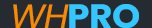
<style>
.page{position:relative;width:152px;height:28px;background:#262a31}
.page>*{position:absolute;margin:0}
.t1{font:33.8px "Poppins-Bold";letter-spacing:-0.01em;color:#33c6ff;text-transform:uppercase;scale:1.06 1}
.t2{font:33.8px "Poppins-Regular";letter-spacing:-0.01em;color:#f78b00;text-transform:uppercase;font-style:italic;scale:1.06 1}
</style>
<div class="page">
<p class="t1" style="left:13px;top:4px;width:126px;height:25px"><span class="t2">wh</span>pro</p>
</div>
